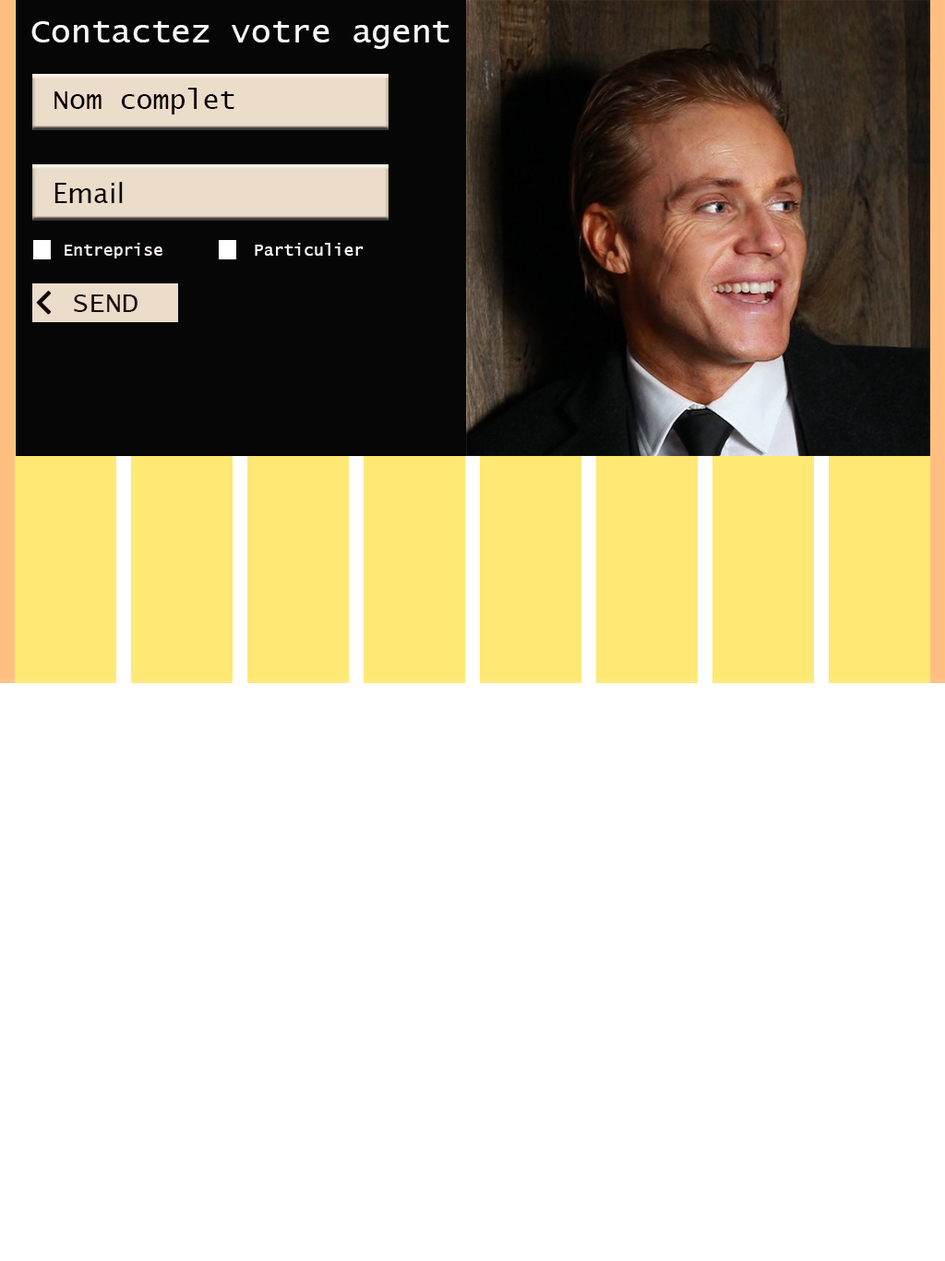
<style>
.page{position:relative;width:945px;height:1261px;background:#ffffff}
.page>*{position:absolute;margin:0}
.t1{font:33.2px "LucidaConsole";color:#f8f6f6}
.t2{font:27.7px "LucidaConsole";color:#090202}
.t3{font:27.7px "LucidaSans";color:#080303}
.t4{font:16.6px "LucidaConsole";color:#f6efef}
.t5{font:16.6px "LucidaConsole";color:#fcf6f6}
.t6{font:27.7px "LucidaConsole";color:#1a0e0e}
</style>
<div class="page">
<p class="t1" style="left:31px;top:21px;width:419px;height:28px">Contactez votre agent</p>
<p class="t2" style="left:54px;top:88px;width:181px;height:26px">Nom complet</p>
<p class="t3" style="left:54px;top:182px;width:69px;height:21px">Email</p>
<p class="t4" style="left:65px;top:243px;width:98px;height:16px">Entreprise</p>
<p class="t5" style="left:255px;top:243px;width:109px;height:13px">Particulier</p>
<p class="t6" style="left:74px;top:295px;width:64px;height:17px">SEND</p>
</div>
